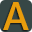
<style>
.page{position:relative;width:32px;height:32px;background:#374746}
.page>*{position:absolute;margin:0}
.t1{font:37.8px "HelveticaNeueLTStd-Md";color:#e89c0c}
</style>
<div class="page">
<p class="t1" style="left:3px;top:2px;width:26px;height:28px">A</p>
</div>
